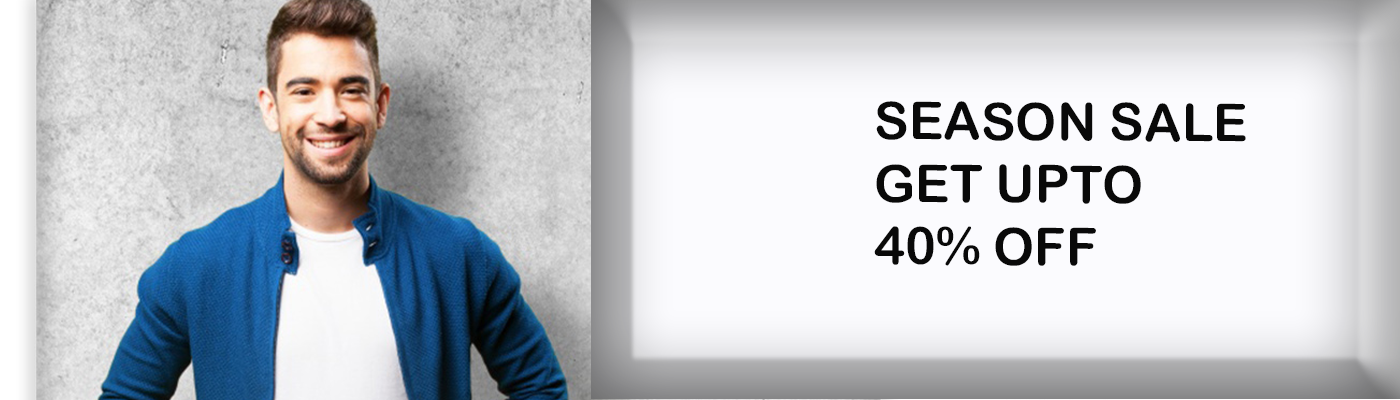
<style>
.page{position:relative;width:1400px;height:400px;background:#fbfbfe}
.page>*{position:absolute;margin:0}
.t1{font:52.1px "ArialRoundedMTBold";color:#090909}
.t2{font:85.6px "BellMTItalic";color:#090909}
</style>
<div class="page">
<p class="t1" style="left:874px;top:101px;width:372px;height:165px"><span class="t2"> </span>SEASON SALE<br> GET UPTO<br> 40% OFF</p>
</div>
